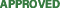
<style>
.page{position:relative;width:60px;height:8px;background:#397d42}
.page>*{position:absolute;margin:0}
.t1{font:12px "AcuminConcept-SemiCondensedBold";color:#397d42}
</style>
<div class="page">
<p class="t1" style="left:0px;top:0px;width:60px;height:9px">APPROVED</p>
</div>
